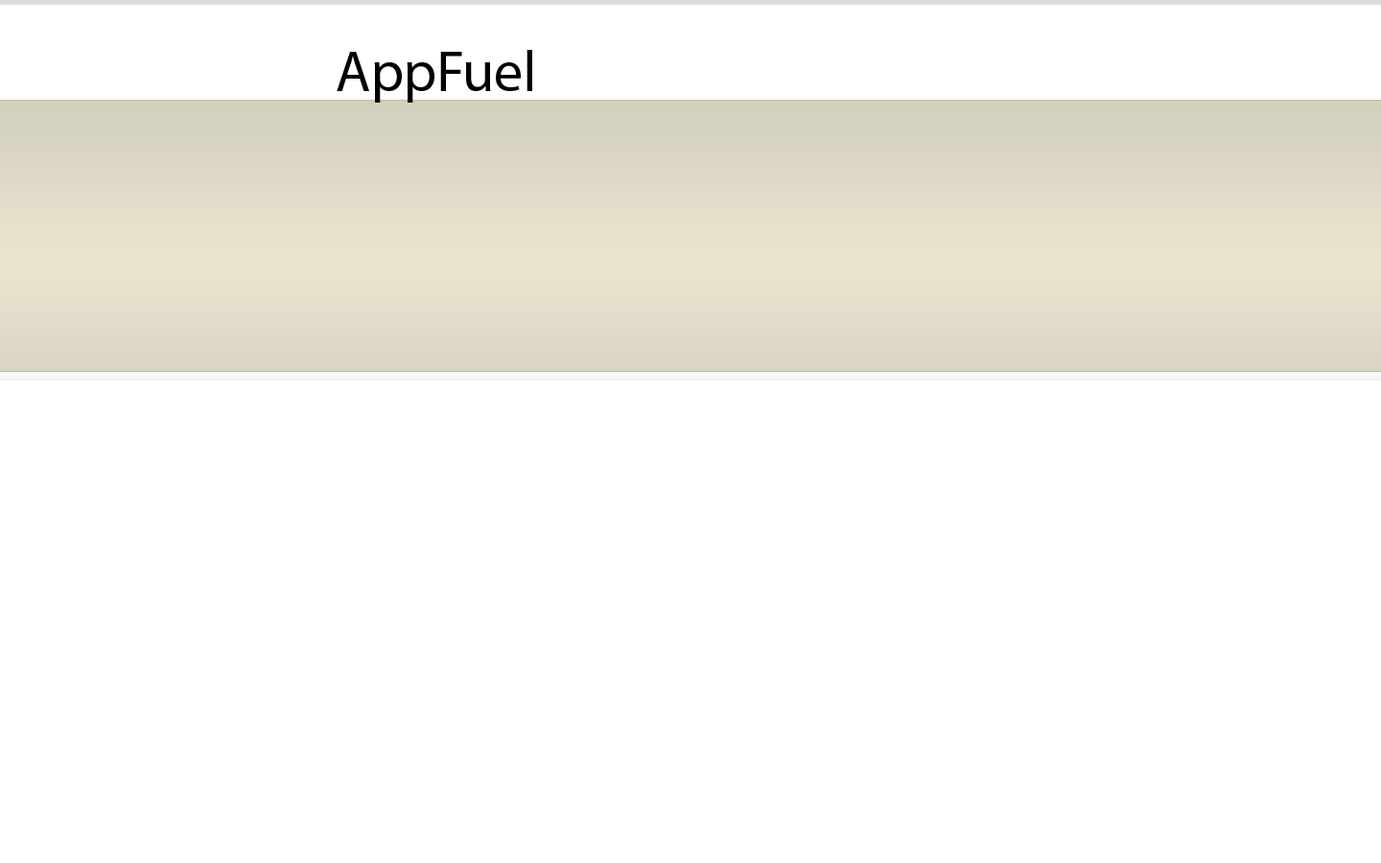
<style>
.page{position:relative;width:1381px;height:863px;background:#ffffff}
.page>*{position:absolute;margin:0}
.t1{font:57.6px "MyriadPro-Regular";color:#000000}
</style>
<div class="page">
<p class="t1" style="left:337px;top:50px;width:195px;height:53px">AppFuel</p>
</div>
